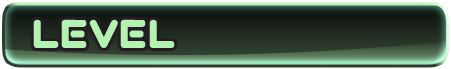
<style>
.page{position:relative;width:451px;height:69px}
.page>*{position:absolute;margin:0}
.t1{font:36px "Virgo01";color:#b3f3b0}
</style>
<div class="page">
<p class="t1" style="left:33px;top:19px;width:142px;height:29px">level</p>
</div>
